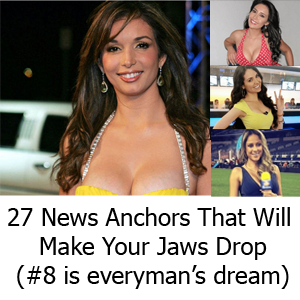
<style>
.page{position:relative;width:300px;height:300px;background:#ffffff}
.page>*{position:absolute;margin:0}
.t1{font:24px "Tahoma";color:#000000}
</style>
<div class="page">
<p class="t1" style="left:8px;top:207px;width:282px;height:82px;text-align:center">27 News Anchors That Will <br>Make Your Jaws Drop<br>(#8 is everyman’s dream)</p>
</div>
